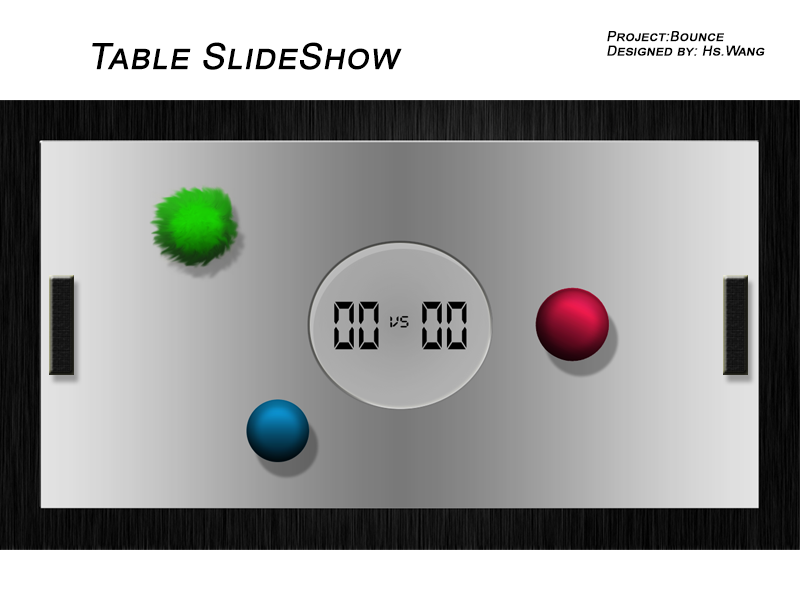
<style>
.page{position:relative;width:800px;height:600px;background:#ffffff}
.page>*{position:absolute;margin:0}
.t1{font:14px/7.2px "ArialMT";color:#000000;font-variant:small-caps;font-weight:bold;font-style:italic}
.t2{font:36px "ArialMT";color:#000000;font-variant:small-caps;font-weight:bold;font-style:italic}
</style>
<div class="page">
<p class="t1" style="left:607px;top:31px;width:158px;height:25px">Project:Bounce    <br><br>Designed by: Hs.Wang</p>
<p class="t2" style="left:92px;top:42px;width:310px;height:28px">Table SlideShow</p>
</div>
